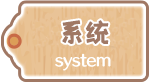
<style>
.page{position:relative;width:149px;height:82px}
.page>*{position:absolute;margin:0}
.t1{font:15.6px "shetumodengxiaofangti";color:#a07864;font-weight:bold;scale:0.94 1}
</style>
<div class="page">
<p class="t1" style="left:62px;top:20px;width:47px;height:24px">系统</p>
</div>
